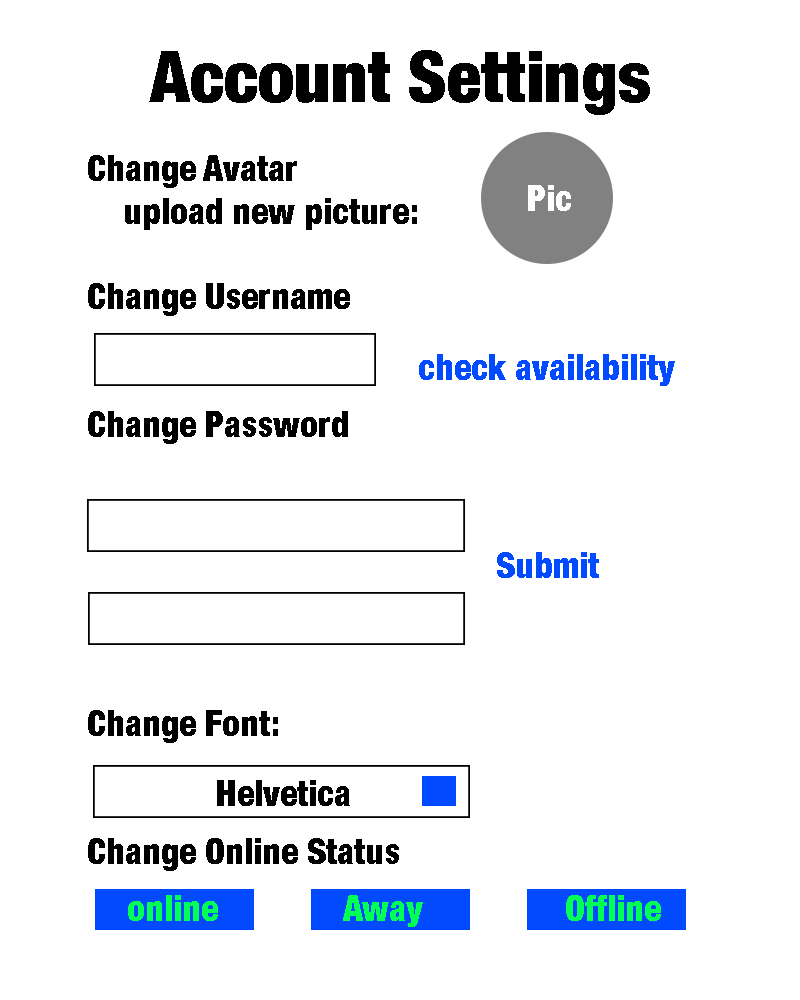
<style>
.page{position:relative;width:800px;height:1000px;background:#ffffff}
.page>*{position:absolute;margin:0}
.t1{font:71.1px "HelveticaNeue-CondensedBlack";color:#000000}
.t2{font:35.6px "HelveticaNeue-CondensedBlack";color:#000000}
.t3{font:35.6px "HelveticaNeue-CondensedBlack";color:#fefefe}
.t4{font:35.6px "HelveticaNeue-CondensedBlack";color:#024aff}
.t5{font:35.6px "HelveticaNeue-CondensedBlack";color:#02ff55}
</style>
<div class="page">
<p class="t1" style="left:149px;top:50px;width:501px;height:65px">Account Settings</p>
<p class="t2" style="left:88px;top:155px;width:329px;height:716px">Change Avatar<br> upload new picture:<br><br>Change Username<br><br><br>Change Password<br><br><br><br><br><br><br>Change Font:<br><br><br>Change Online Status</p>
<p class="t3" style="left:528px;top:185px;width:43px;height:26px">Pic</p>
<p class="t4" style="left:419px;top:354px;width:256px;height:32px">check availability</p>
<p class="t4" style="left:497px;top:552px;width:102px;height:26px">Submit</p>
<p class="t2" style="left:217px;top:780px;width:133px;height:26px">Helvetica</p>
<p class="t5" style="left:128px;top:895px;width:90px;height:26px">online</p>
<p class="t5" style="left:343px;top:895px;width:80px;height:32px">Away</p>
<p class="t5" style="left:566px;top:895px;width:95px;height:26px">Offline</p>
</div>
